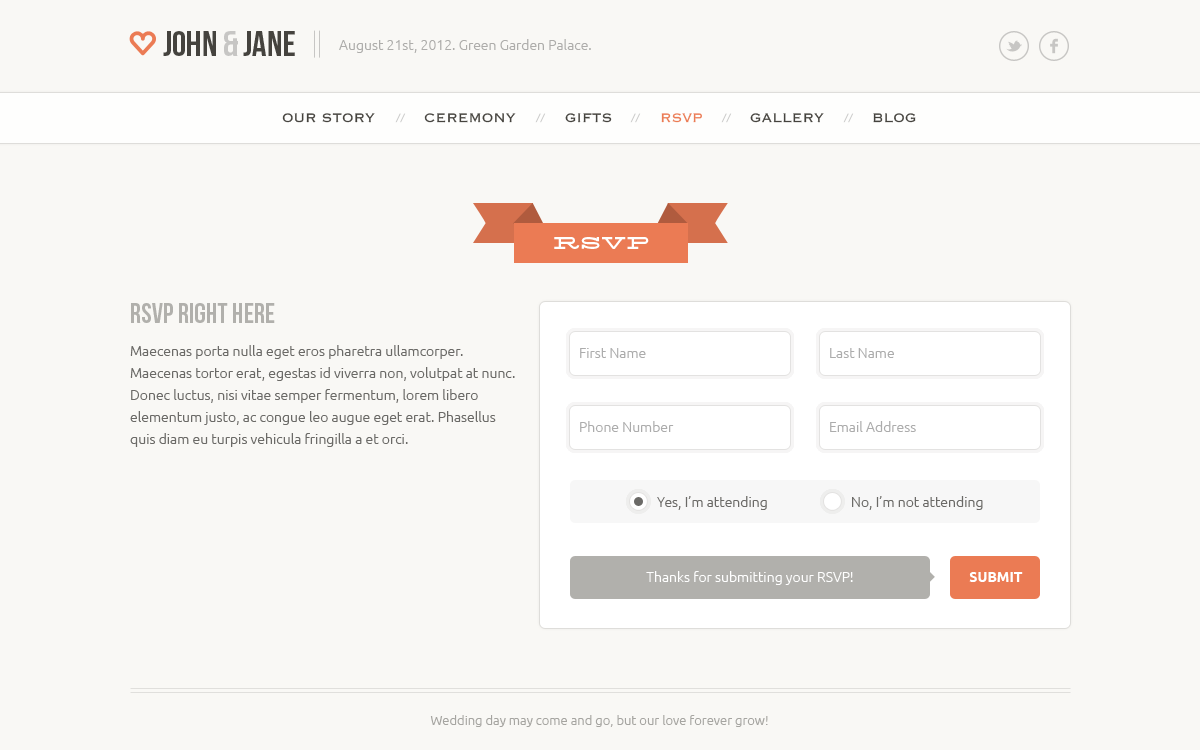
<style>
.page{position:relative;width:1200px;height:750px;background:#f9f8f5}
.page>*{position:absolute;margin:0}
.t1{font:36px "BebasNeue";color:#45433e;text-transform:uppercase}
.t2{font:36px "BebasNeue";color:#c7c6c4;text-transform:uppercase}
.t3{font:14px "Ubuntu-Light";color:#aeadab}
.t4{font:16px "Copperplate-Light";color:#45433e;text-transform:uppercase}
.t5{font:16px "Copperplate-Light";color:#eb7b54;text-transform:uppercase}
.t6{font:24px "Silverfake";color:#ffffff;text-transform:uppercase}
.t7{font:28px "BebasNeue";color:#b1b0ac;text-transform:uppercase}
.t8{font:14px/22px "Ubuntu-Light";color:#6b6a67}
.t9{font:14px "Ubuntu-Light";color:#acacac}
.t10{font:14px "Ubuntu-Light";color:#6b6a67}
.t11{font:14px "Ubuntu-Light";color:#ffffff}
.t12{font:14px "Ubuntu-Bold";color:#ffffff;text-transform:uppercase}
.t13{font:13px "Ubuntu-Light";color:#a6a5a1}
</style>
<div class="page">
<p class="t1" style="left:163px;top:31px;width:132px;height:25px">John <span class="t2">&amp;</span> Jane</p>
<p class="t3" style="left:339px;top:39px;width:252px;height:14px">August 21st, 2012. Green Garden Palace.</p>
<p class="t4" style="left:282px;top:113px;width:93px;height:10px">Our story</p>
<p class="t4" style="left:424px;top:113px;width:92px;height:10px">Ceremony</p>
<p class="t4" style="left:565px;top:113px;width:47px;height:10px">Gifts</p>
<p class="t5" style="left:661px;top:113px;width:41px;height:10px">RSVP</p>
<p class="t4" style="left:750px;top:113px;width:74px;height:10px">Gallery</p>
<p class="t4" style="left:873px;top:113px;width:43px;height:10px">Blog</p>
<p class="t6" style="left:554px;top:237px;width:95px;height:12px">RSVP</p>
<p class="t7" style="left:131px;top:303px;width:144px;height:20px">RSVP right here</p>
<p class="t8" style="left:130px;top:345px;width:385px;height:102px">Maecenas porta nulla eget eros pharetra ullamcorper. Maecenas tortor erat, egestas id viverra non, volutpat at nunc. Donec luctus, nisi vitae semper fermentum, lorem libero elementum justo, ac congue leo augue eget erat. Phasellus quis diam eu turpis vehicula fringilla a et orci.</p>
<p class="t9" style="left:580px;top:348px;width:66px;height:10px">First Name</p>
<p class="t9" style="left:830px;top:348px;width:64px;height:10px">Last Name</p>
<p class="t9" style="left:580px;top:421px;width:94px;height:11px">Phone Number</p>
<p class="t9" style="left:830px;top:421px;width:86px;height:11px">Email Address</p>
<p class="t10" style="left:657px;top:496px;width:110px;height:14px">Yes, I’m attending</p>
<p class="t10" style="left:852px;top:496px;width:131px;height:14px">No, I’m not attending</p>
<p class="t11" style="left:646px;top:571px;width:207px;height:14px">Thanks for submitting your RSVP!</p>
<p class="t12" style="left:969px;top:572px;width:54px;height:10px">Submit</p>
<p class="t13" style="left:430px;top:715px;width:338px;height:12px">Wedding day may come and go, but our love forever grow!</p>
</div>
